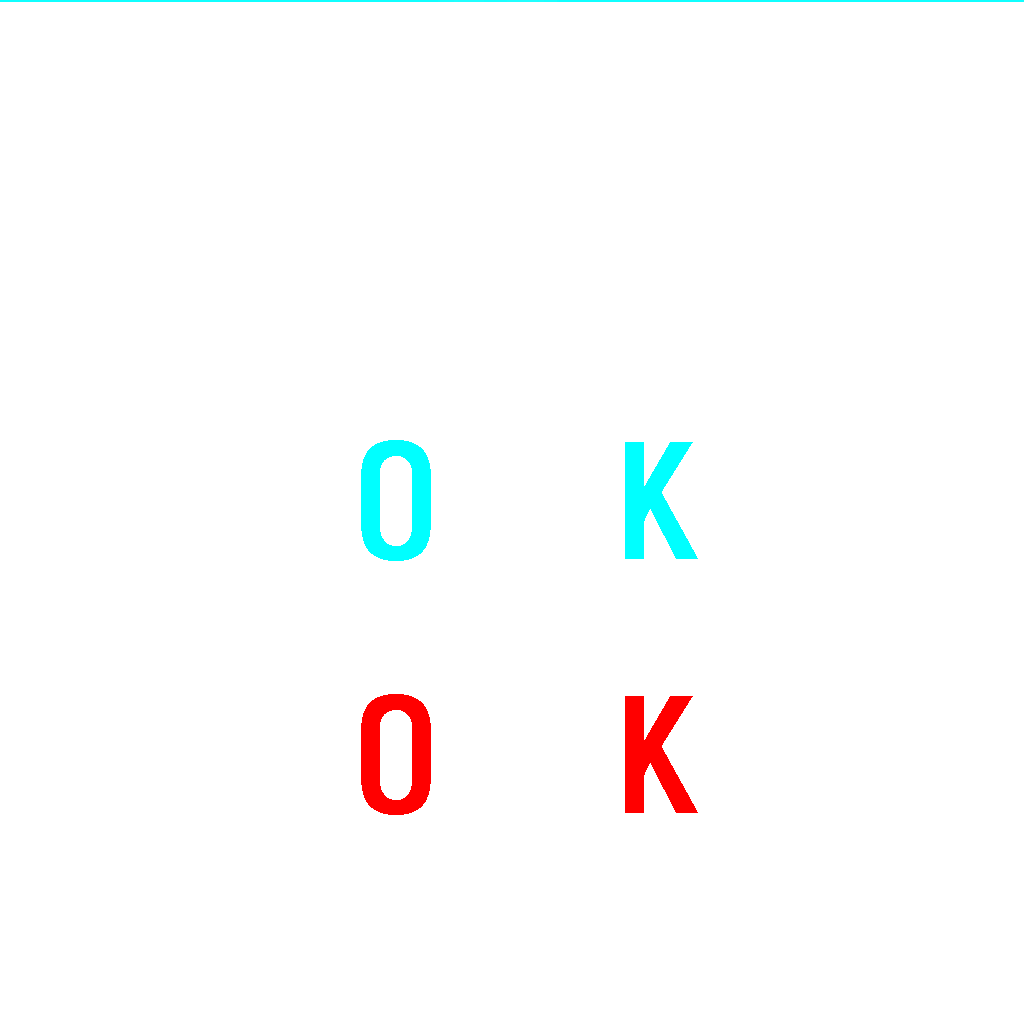
<style>
.page{position:relative;width:1024px;height:1024px;background:#ffffff}
.page>*{position:absolute;margin:0}
.t1{font:137.5px "H2hdrM";color:#00ffff}
</style>
<div class="page">
<p class="t1" style="left:361px;top:438px;width:337px;height:121px">O    K</p>
</div>
